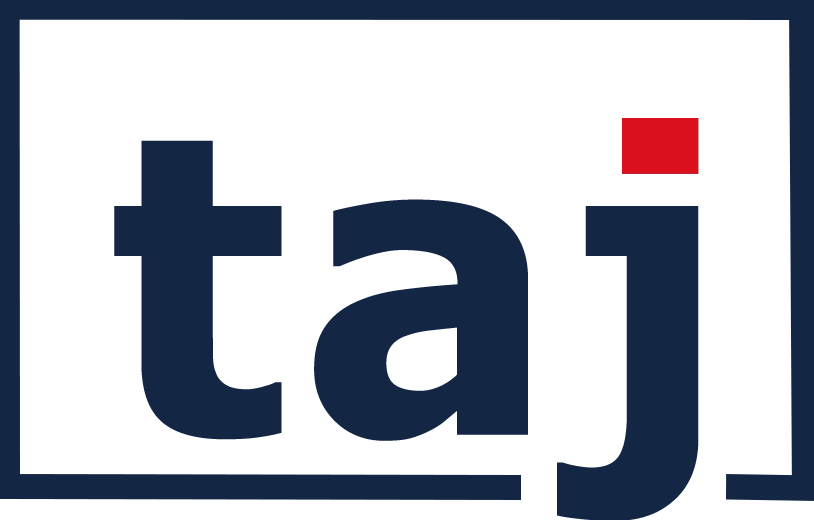
<style>
.page{position:relative;width:814px;height:520px;background:#ffffff}
.page>*{position:absolute;margin:0}
.t1{font:416.7px "Tahoma-Bold";letter-spacing:0.05em;color:#132744}
</style>
<div class="page">
<p class="t1" style="left:114px;top:118px;width:585px;height:403px">taj</p>
</div>
